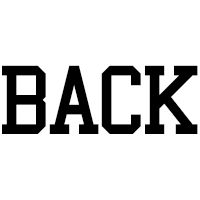
<style>
.page{position:relative;width:200px;height:200px;background:#ffffff}
.page>*{position:absolute;margin:0}
.t1{font:99.7px "College";letter-spacing:-0.06em;color:#000000}
</style>
<div class="page">
<p class="t1" style="left:2px;top:65px;width:196px;height:69px">BACK</p>
</div>
